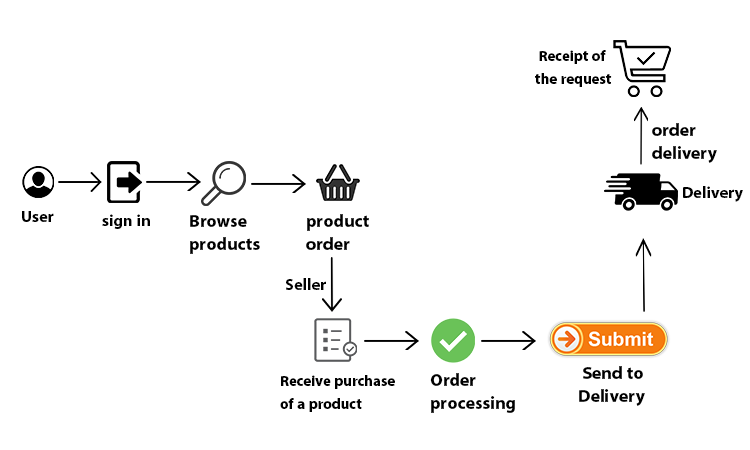
<style>
.page{position:relative;width:750px;height:450px;background:#ffffff}
.page>*{position:absolute;margin:0}
.t1{font:20.8px/22.9px "MyriadArabic-Bold";color:#000000}
.t2{font:25px/22.9px "MyriadArabic-Bold";color:#000000}
.t3{font:22.9px "MyriadArabic-Bold";color:#000000}
</style>
<div class="page">
<p class="t1" style="left:535px;top:50px;width:77px;height:37px;text-align:right">Receipt of <br>the request</p>
<p class="t2" style="left:652px;top:123px;width:65px;height:40px;text-align:right">order<br> delivery</p>
<p class="t3" style="left:683px;top:186px;width:60px;height:16px">Delivery</p>
<p class="t3" style="left:22px;top:211px;width:32px;height:11px">User</p>
<p class="t3" style="left:102px;top:214px;width:48px;height:15px">sign in</p>
<p class="t2" style="left:190px;top:215px;width:70px;height:39px;text-align:right">Browse<br> products</p>
<p class="t2" style="left:306px;top:214px;width:63px;height:36px;text-align:right">product<br> order</p>
<p class="t3" style="left:286px;top:278px;width:40px;height:12px">Seller</p>
<p class="t2" style="left:579px;top:366px;width:66px;height:40px;text-align:right">Send to <br>Delivery</p>
<p class="t1" style="left:280px;top:375px;width:115px;height:37px;text-align:right">Receive purchase<br> of a product</p>
<p class="t2" style="left:430px;top:373px;width:85px;height:40px;text-align:right">Order<br> processing</p>
</div>
